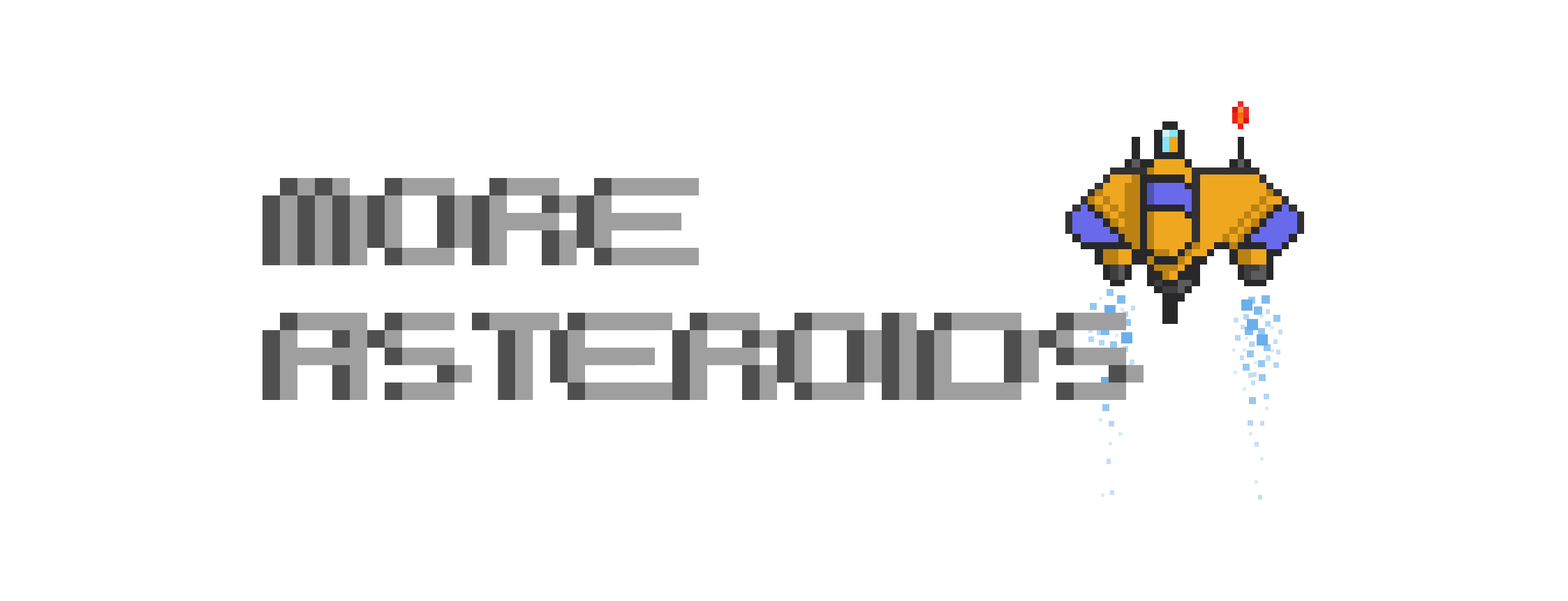
<style>
.page{position:relative;width:1568px;height:601px;background:#ffffff}
.page>*{position:absolute;margin:0}
.t1{font:174.5px/134.7px "BooCity"}
.t2{font:174.5px/134.7px "BooCity";color:#a09f9f}
</style>
<div class="page">
<p class="t1" style="left:262px;top:178px;width:864px;height:222px">MORE<br>ASTEROIDS</p>
<p class="t2" style="left:280px;top:178px;width:864px;height:222px">MORE<br>ASTEROIDS</p>
</div>
